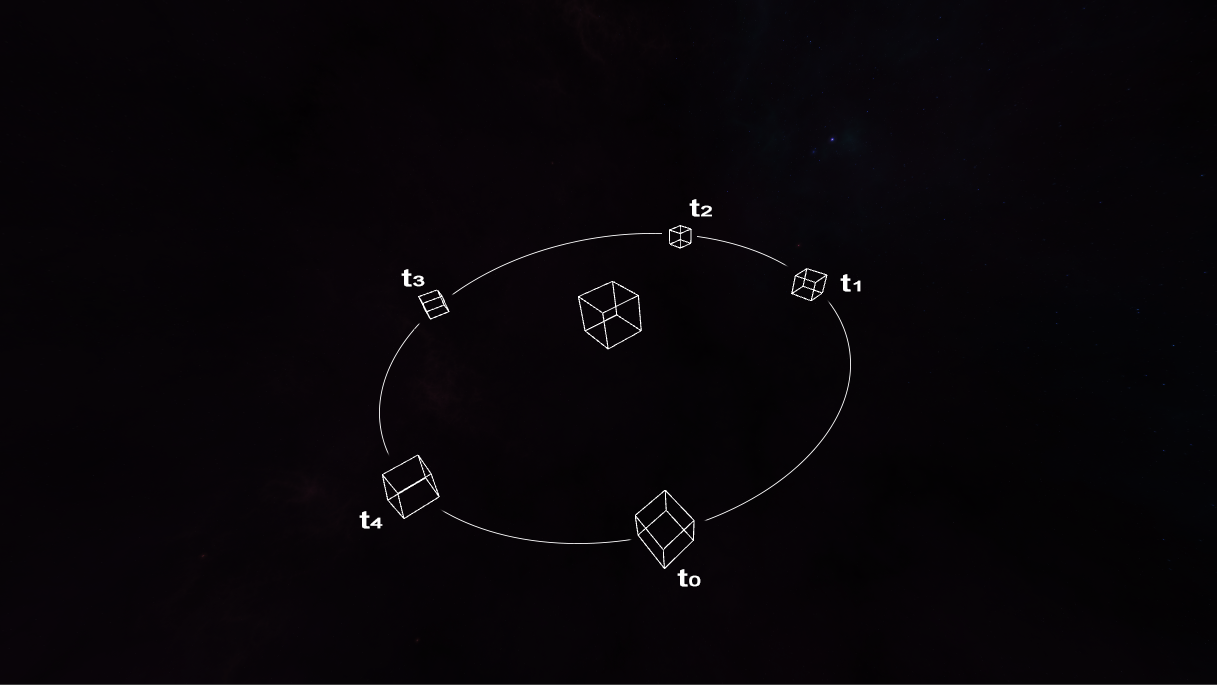
<style>
.page{position:relative;width:1217px;height:685px}
.page>*{position:absolute;margin:0}
.t1{font:24px "ArialMT";letter-spacing:0.025em;color:#ffffff;font-weight:bold;scale:1.5 1}
.t2{font:14.7px "ArialMT";letter-spacing:0.025em;color:#ffffff;font-weight:bold;scale:1.5 1}
</style>
<div class="page">
<p class="t1" style="left:689px;top:199px;width:23px;height:18px">t<span class="t2">2</span></p>
<p class="t1" style="left:401px;top:269px;width:24px;height:18px">t<span class="t2">3</span></p>
<p class="t1" style="left:840px;top:274px;width:21px;height:18px">t<span class="t2">1</span></p>
<p class="t1" style="left:359px;top:511px;width:24px;height:18px">t<span class="t2">4</span></p>
<p class="t1" style="left:677px;top:569px;width:24px;height:18px">t<span class="t2">0</span></p>
</div>
